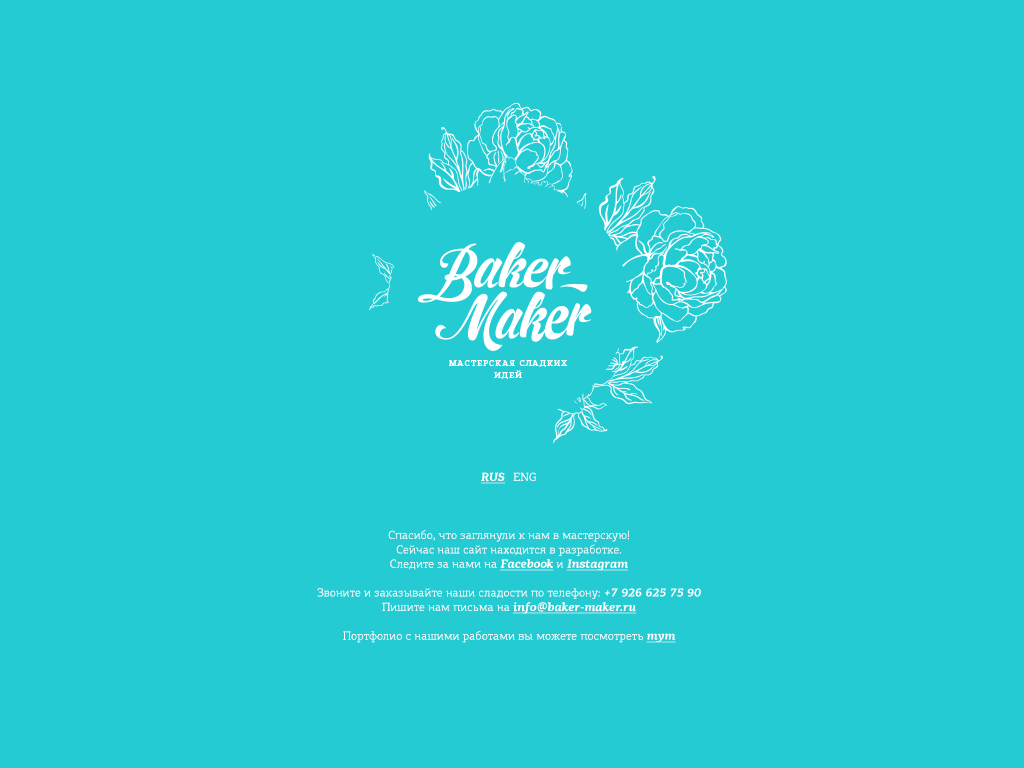
<style>
.page{position:relative;width:1024px;height:768px;background:#25cbd3}
.page>*{position:absolute;margin:0}
.t1{font:12px "PFAgoraSlabPro-BoldItalic";color:#ffffff;text-decoration:underline}
.t2{font:12px "PFAgoraSlabPro-Regular";color:#ffffff}
.t3{font:12px "PFAgoraSlabPro-BoldItalic";color:#ffffff}
</style>
<div class="page">
<p class="t1" style="left:481px;top:472px;width:24px;height:12px">RUS</p>
<p class="t2" style="left:513px;top:472px;width:23px;height:9px">ENG</p>
<p class="t2" style="left:317px;top:530px;width:384px;height:113px;text-align:center">Спасибо, что заглянули к нам в мастерскую!<br>Сейчас наш сайт находится в разработке.<br>Следите за нами на <span class="t1">Facebook </span>и <span class="t1">Instagram<br></span><br>Звоните и заказывайте наши сладости по телефону: <span class="t3">+7 926 625 75 90<br></span>Пишите нам письма на <span class="t1">info@baker-maker.ru<br></span><br>Портфолио с нашими работами вы можете посмотреть <span class="t1">тут</span></p>
</div>
